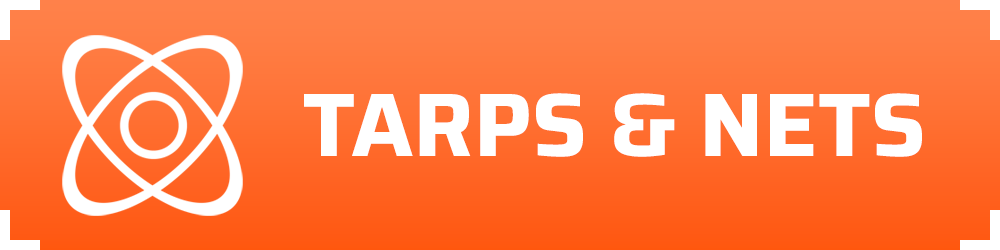
<style>
.page{position:relative;width:1000px;height:250px}
.page>*{position:absolute;margin:0}
.t1{font:90px "SairaRoman-Bold";color:#ffffff;font-weight:bold}
</style>
<div class="page">
<p class="t1" style="left:304px;top:93px;width:618px;height:64px">TARPS &amp; NETS</p>
</div>
